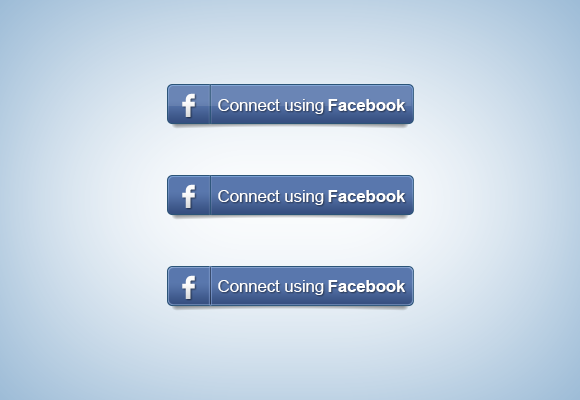
<style>
.page{position:relative;width:580px;height:400px}
.page>*{position:absolute;margin:0}
.t1{font:16.7px "ArialMT";color:#ffffff}
.t2{font:16.7px "Arial-BoldMT";color:#ffffff}
</style>
<div class="page">
<p class="t1" style="left:218px;top:99px;width:106px;height:15px">Connect using</p>
<p class="t2" style="left:328px;top:99px;width:77px;height:12px">Facebook</p>
<p class="t1" style="left:218px;top:190px;width:106px;height:15px">Connect using</p>
<p class="t2" style="left:328px;top:190px;width:77px;height:12px">Facebook</p>
<p class="t1" style="left:218px;top:280px;width:106px;height:15px">Connect using</p>
<p class="t2" style="left:328px;top:280px;width:77px;height:12px">Facebook</p>
</div>
